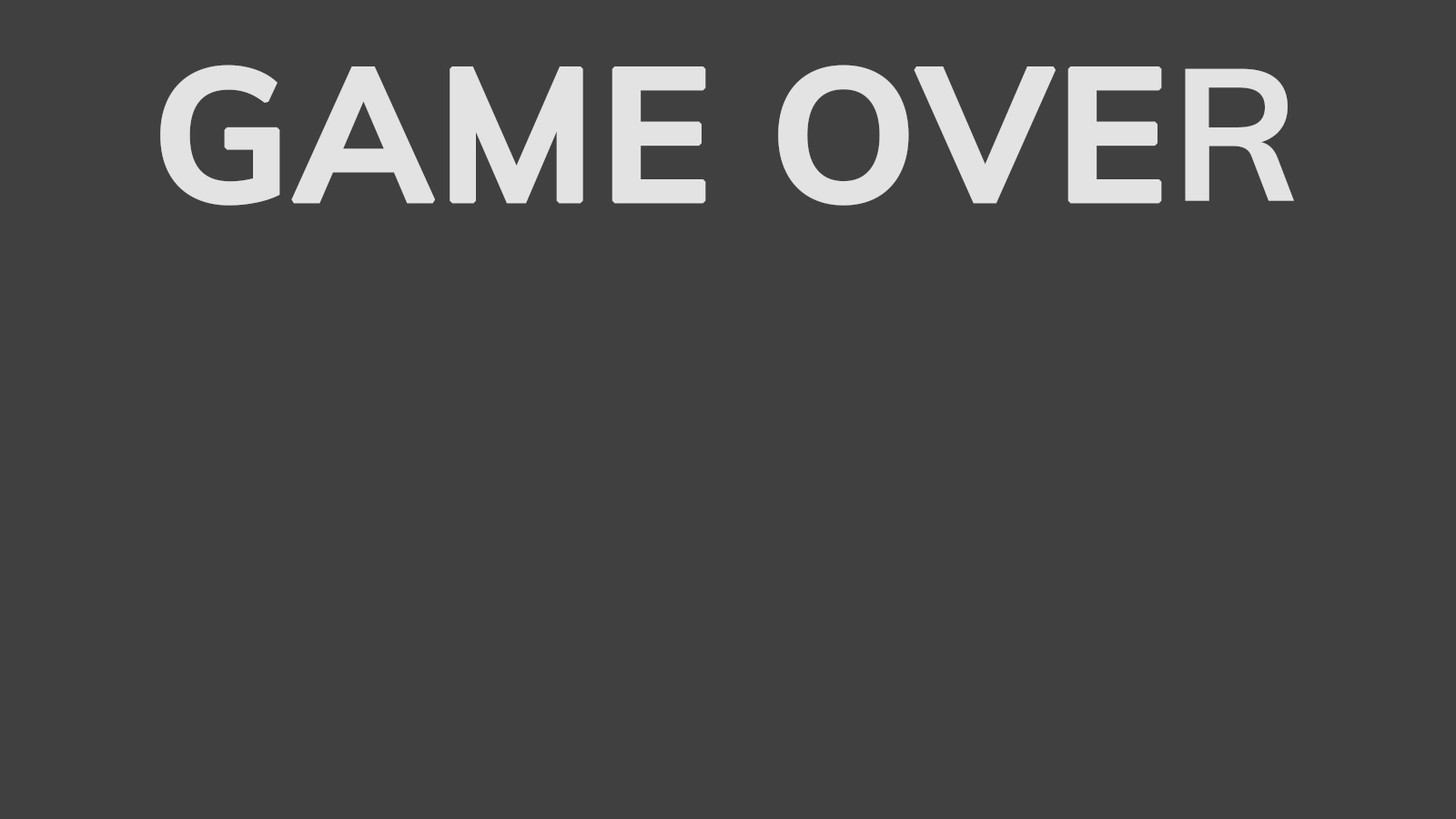
<style>
.page{position:relative;width:1456px;height:819px;background:#404040}
.page>*{position:absolute;margin:0}
.t1{font:185px "Muli-Bold";color:#e3e3e3;font-weight:bold}
</style>
<div class="page">
<p class="t1" style="left:160px;top:65px;width:1134px;height:141px">GAME OVER</p>
</div>
